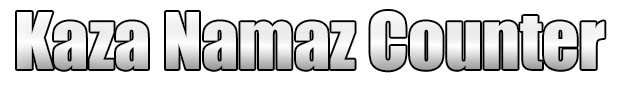
<style>
.page{position:relative;width:622px;height:85px;background:#ffffff}
.page>*{position:absolute;margin:0}
.t1{font:72px "Impact";color:#eeeeee}
</style>
<div class="page">
<p class="t1" style="left:17px;top:11px;width:588px;height:60px">Kaza Namaz Counter</p>
</div>
